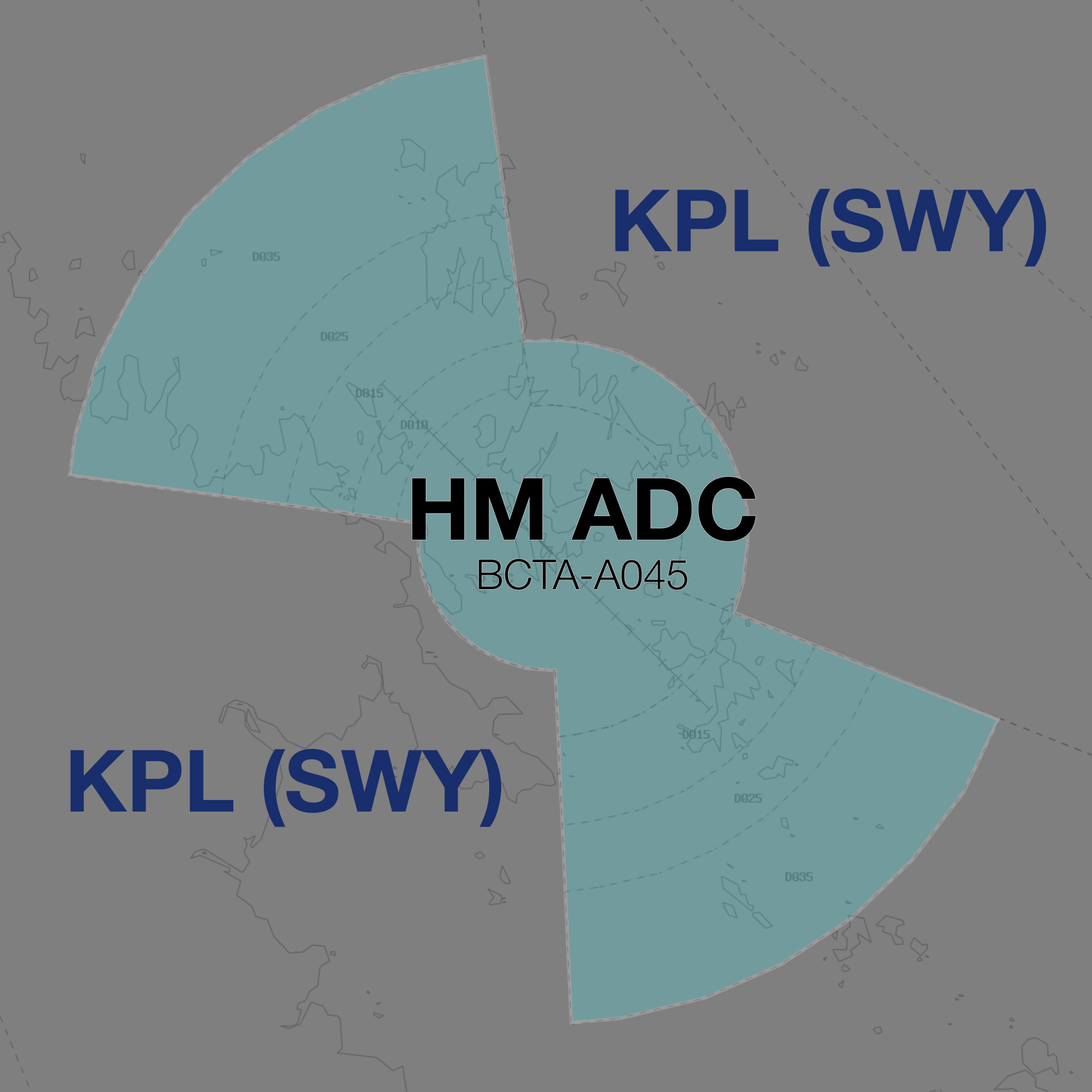
<style>
.page{position:relative;width:1092px;height:1092px;background:#7f7f7f}
.page>*{position:absolute;margin:0}
.t1{font:86.2px "HelveticaNeue-Bold";color:#182e6d}
.t2{font:41.4px "HelveticaNeue-Light";color:#000000}
.t3{font:86.2px "HelveticaNeue-Bold";color:#000000}
</style>
<div class="page">
<p class="t1" style="left:615px;top:188px;width:432px;height:79px">KPL (SWY)</p>
<p class="t2" style="left:412px;top:476px;width:344px;height:114px;text-align:center"><span class="t3">HM ADC<br></span>BCTA-A045</p>
<p class="t1" style="left:70px;top:748px;width:432px;height:79px">KPL (SWY)</p>
</div>
